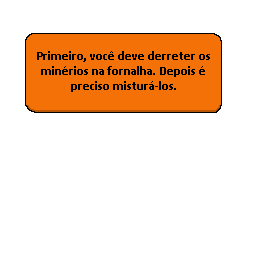
<style>
.page{position:relative;width:256px;height:256px;background:#ffffff}
.page>*{position:absolute;margin:0}
.t1{font:12.5px "Calibri-Bold";color:#000000}
</style>
<div class="page">
<p class="t1" style="left:37px;top:51px;width:173px;height:41px;text-align:center">Primeiro, você deve derreter os minérios na fornalha. Depois é preciso misturá-los.</p>
</div>
